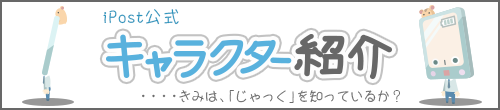
<style>
.page{position:relative;width:500px;height:110px;background:#ffffff}
.page>*{position:absolute;margin:0}
.t1{font:18px "id-MARUP-Light";color:#2a95bd}
.t2{font:14px "id-MARU-Light";letter-spacing:-0.04em;color:#6b6b6b}
.t3{font:14px "id-MARU-Light";letter-spacing:-0.26em;color:#6b6b6b}
</style>
<div class="page">
<p class="t1" style="left:103px;top:9px;width:76px;height:16px">iPost公式</p>
<p class="t2" style="left:142px;top:90px;width:258px;height:13px"><span class="t3">・・・・</span>きみは、 「じゃっく」を知っているか？</p>
</div>
